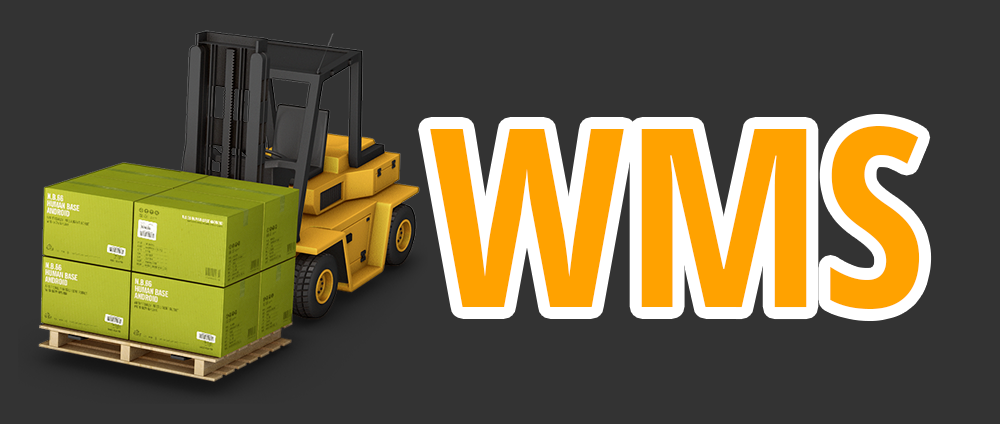
<style>
.page{position:relative;width:1000px;height:424px;background:#333333}
.page>*{position:absolute;margin:0}
.t1{font:250px "OpenSans-CondensedBold";color:#ffa200}
</style>
<div class="page">
<p class="t1" style="left:430px;top:126px;width:490px;height:183px">WMS</p>
</div>
